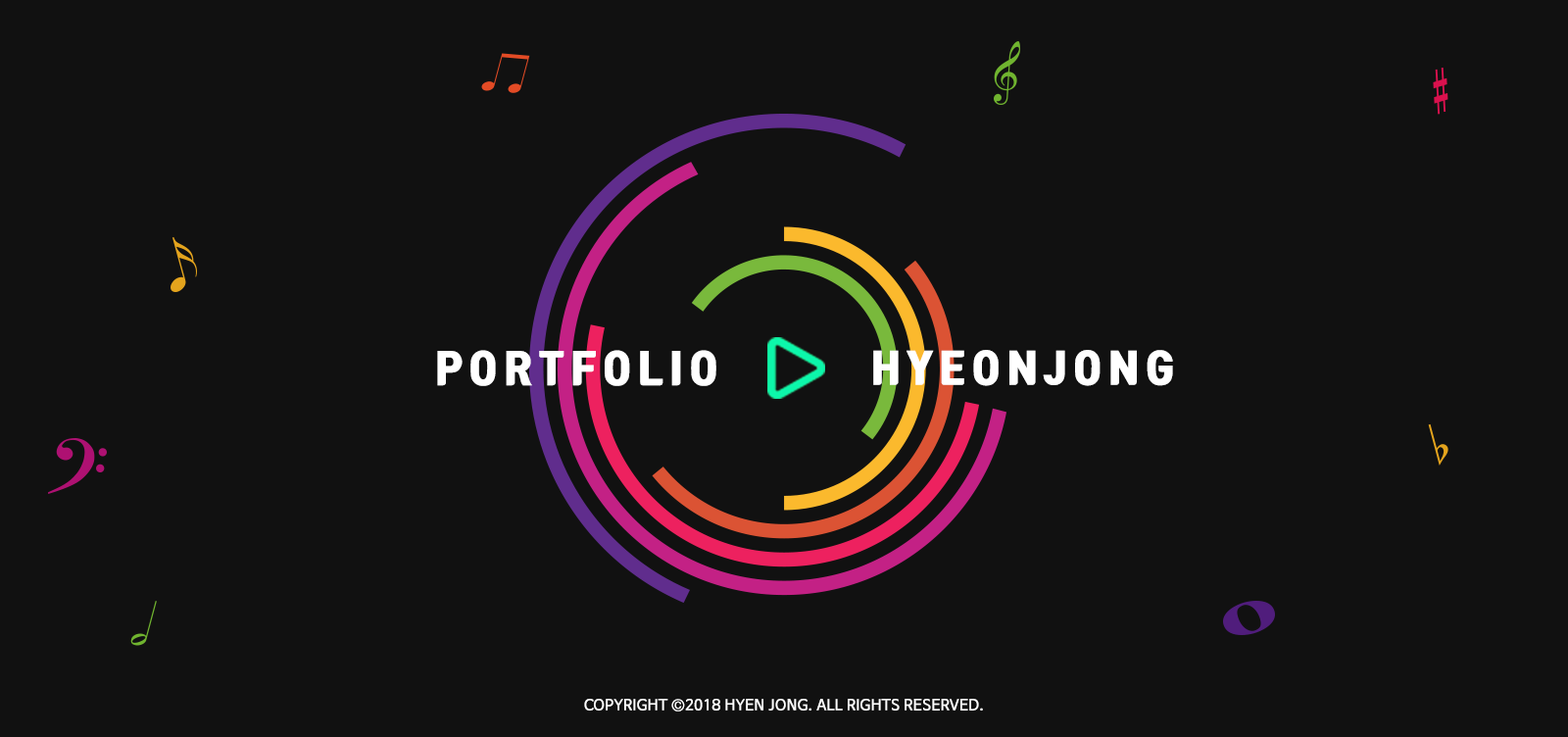
<style>
.page{position:relative;width:1568px;height:737px;background:#111111}
.page>*{position:absolute;margin:0}
.t1{font:39.2px "TmonMonsoriBlack";letter-spacing:0.15em;color:#ffffff;font-weight:bold}
.t2{font:14.7px "NanumBarunGothic";color:#fefefe;font-weight:bold}
</style>
<div class="page">
<p class="t1" style="left:437px;top:350px;width:279px;height:36px">PORTFOLIO</p>
<p class="t1" style="left:873px;top:350px;width:300px;height:36px">HYEONJONG</p>
<p class="t2" style="left:584px;top:699px;width:399px;height:12px">COPYRIGHT ©2018 HYEN JONG. ALL RIGHTS RESERVED.</p>
</div>
